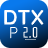
<style>
.page{position:relative;width:48px;height:48px}
.page>*{position:absolute;margin:0}
.t1{font:21px "Quicksand-Bold";color:#ffffff}
.t2{font:16px "Quicksand-Regular";color:#ffffff}
.t3{font:15px "Rationale-Regular";color:#ffffff}
</style>
<div class="page">
<p class="t1" style="left:4px;top:9px;width:40px;height:16px">DTX</p>
<p class="t2" style="left:10px;top:26px;width:8px;height:13px">P</p>
<p class="t3" style="left:23px;top:27px;width:15px;height:11px">2.0</p>
</div>
